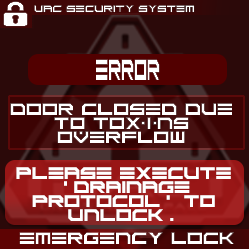
<style>
.page{position:relative;width:249px;height:249px}
.page>*{position:absolute;margin:0}
.t1{font:6.8px "ScifiAdventure";color:#ffffff}
.t2{font:20.5px "ScifiAdventure";color:#ffffff;scale:0.46 1}
.t3{font:11.7px "ScifiAdventure";color:#ffffff}
</style>
<div class="page">
<p class="t1" style="left:34px;top:5px;width:161px;height:8px">UAC SECURITY SYSTEM</p>
<p class="t2" style="left:96px;top:59px;width:64px;height:21px">error</p>
<p class="t3" style="left:10px;top:103px;width:222px;height:40px;text-align:center">Door closed due to toxins overflow</p>
<p class="t3" style="left:16px;top:167px;width:215px;height:54px;text-align:center">PLEASE EXECUTE ‘dRAINAGE pROTOCOL’ TO UNLOCK.</p>
<p class="t3" style="left:19px;top:232px;width:215px;height:12px">emergency lock</p>
</div>
